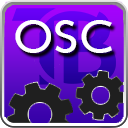
<style>
.page{position:relative;width:128px;height:128px}
.page>*{position:absolute;margin:0}
.t1{font:48px "LondonBetween";color:#ffffff}
</style>
<div class="page">
<p class="t1" style="left:15px;top:20px;width:97px;height:33px">OSC</p>
</div>
